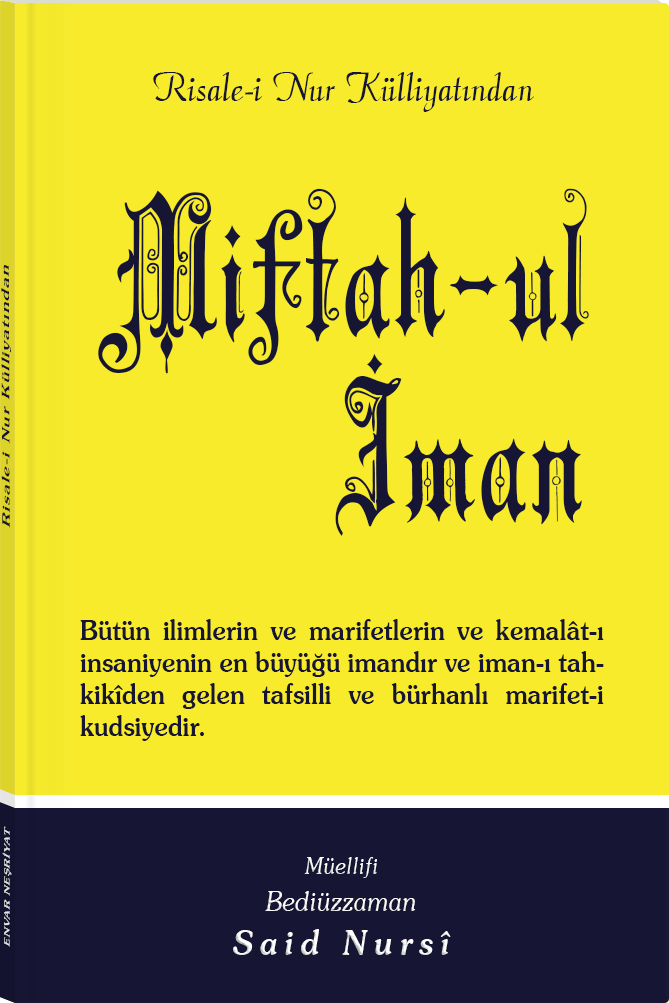
<style>
.page{position:relative;width:669px;height:1003px;background:#f7eb2c}
.page>*{position:absolute;margin:0}
.t1{font:45.3px "Barla © 072 Aria ScriptScriptSSi";color:#161534;scale:0.94 1}
.t2{font:186.9px/166.8px "Barla © 001 Liva Nur";letter-spacing:-0.001em;color:#161534;scale:0.93 1}
.t3{font:186.9px/183.7px "Barla © 001 Liva Nur";letter-spacing:-0.001em;color:#161534;scale:0.93 1}
.t4{font:11.4px "Souvenir-Medium";letter-spacing:0.08em;color:#161534;scale:1.65 1}
.t5{font:27.4px/32px "Souvenir-Medium";color:#161534;scale:0.92 1}
.t6{font:8.3px "Souvenir-Medium";letter-spacing:0.08em;color:#e5e5e5;scale:1.43 1}
.t7{font:27.1px/37.8px "Souvenir-LightItalic";color:#ffffff;scale:0.92 1}
.t8{font:22.8px/39.8px "Souvenir-LightItalic";color:#ffffff;scale:0.92 1}
.t9{font:33.9px/43.8px "Souvenir-MediumItalic";letter-spacing:0.2em;color:#ffffff;scale:0.92 1}
</style>
<div class="page">
<p class="t1" style="left:153px;top:72px;width:381px;height:40px">Risale-i Nur Külliyatından</p>
<p class="t2" style="left:98px;top:188px;width:491px;height:348px;text-align:center">Miftah-ul<br>       <span class="t3">İman</span></p>
<p class="t4" style="left:1px;top:265px;width:10px;height:263px;rotate:-90deg">Risale-i Nur Külliyatından</p>
<p class="t5" style="left:80px;top:619px;width:524px;height:122px;text-align:justify">Bütün ilimlerin ve marifetlerin ve kemalât-ı insaniyenin en büyüğü imandır ve iman-ı tahkikîden gelen tafsilli ve bürhanlı marifet-i kudsiyedir.</p>
<p class="t6" style="left:2px;top:826px;width:10px;height:121px;rotate:-90deg">ENVAR NEŞRİYAT</p>
<p class="t7" style="left:233px;top:857px;width:218px;height:98px;text-align:center"><span class="t8">Müellifi<br></span>Bediüzzaman<br><span class="t9">Said Nursî</span></p>
</div>
